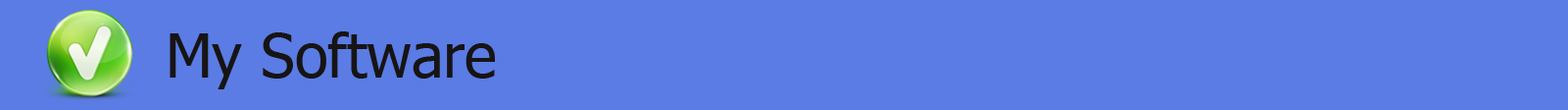
<style>
.page{position:relative;width:1568px;height:110px;background:#5a7ce4}
.page>*{position:absolute;margin:0}
.t1{font:60.3px "Tahoma";color:#171414}
</style>
<div class="page">
<p class="t1" style="left:170px;top:31px;width:325px;height:58px">My Software</p>
</div>
